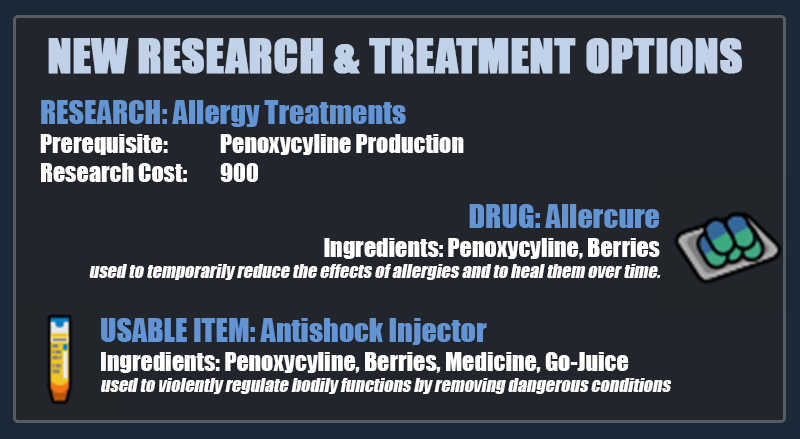
<style>
.page{position:relative;width:800px;height:439px;background:#22262c}
.page>*{position:absolute;margin:0}
.t1{font:44px "Impact";color:#c1d2e8;text-transform:uppercase;font-weight:bold}
.t2{font:24px "Impact";color:#ffffff}
.t3{font:30px "Impact";color:#6394d4}
.t4{font:18px "Impact";color:#ffffff;font-style:italic}
</style>
<div class="page">
<p class="t1" style="left:48px;top:38px;width:694px;height:36px">new research &amp; treatment options</p>
<p class="t2" style="left:40px;top:100px;width:424px;height:82px"><span class="t3">RESEARCH: Allergy Treatments<br></span>Prerequisite:  Penoxycyline Production<br>Research Cost: 900</p>
<p class="t4" style="left:89px;top:204px;width:572px;height:76px;text-align:right"><span class="t3">DRUG: Allercure<br></span><span class="t2">Ingredients: Penoxycyline, Berries<br></span>used to temporarily reduce the effects of allergies and to heal them over time.</p>
<p class="t4" style="left:101px;top:318px;width:570px;height:76px"><span class="t3">USABLE ITEM: Antishock Injector</span><span class="t2"><br>Ingredients: Penoxycyline, Berries, Medicine, Go-Juice<br></span>used to violently regulate bodily functions by removing dangerous conditions</p>
</div>
